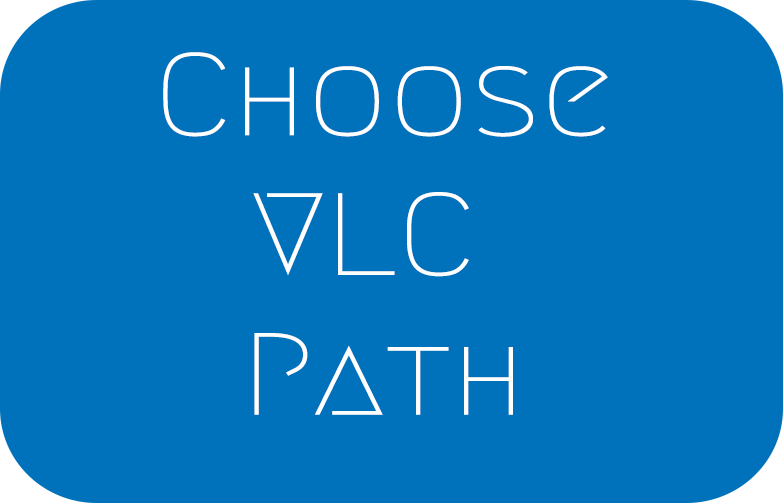
<style>
.page{position:relative;width:783px;height:503px;background:#0072bc}
.page>*{position:absolute;margin:0}
.t1{font:116.5px "Megrim";color:#ffffff;scale:1.16 1}
</style>
<div class="page">
<p class="t1" style="left:163px;top:52px;width:445px;height:363px;text-align:center">Choose<br> VLC<br>Path</p>
</div>
